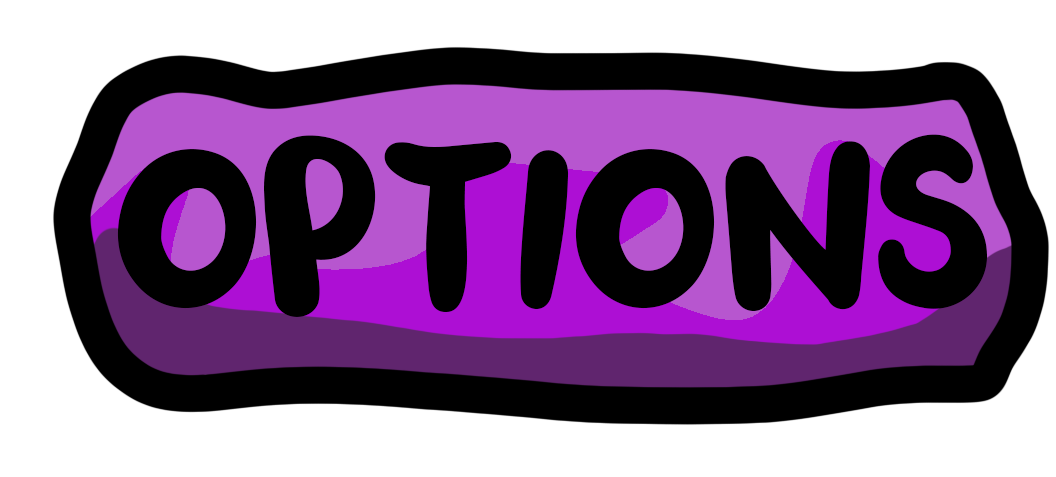
<style>
.page{position:relative;width:1056px;height:477px;background:#ffffff}
.page>*{position:absolute;margin:0}
.t1{font:200px "Pineapple-Days";color:#000000}
</style>
<div class="page">
<p class="t1" style="left:117px;top:134px;width:870px;height:183px">OPTIONS</p>
</div>
